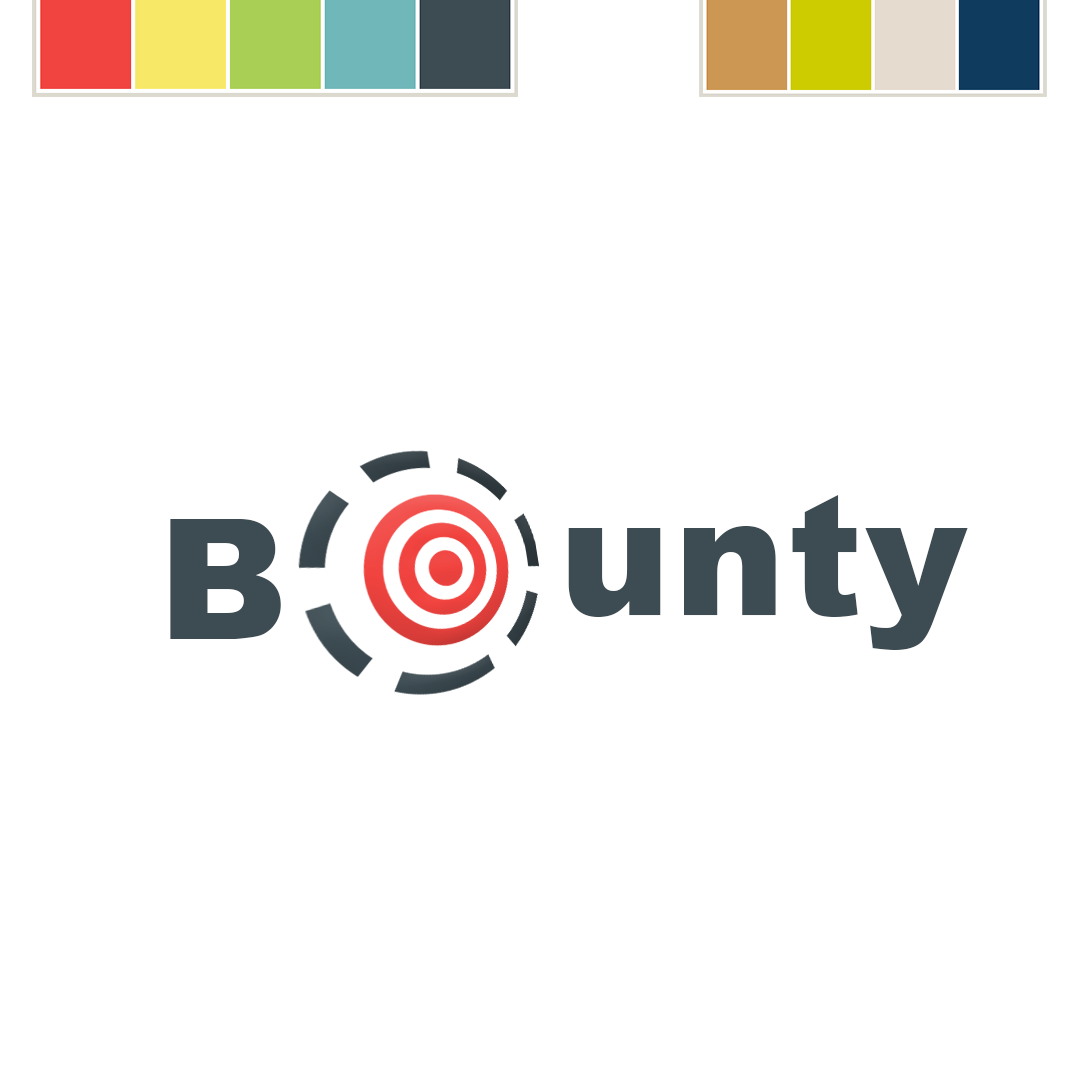
<style>
.page{position:relative;width:1080px;height:1080px;background:#ffffff}
.page>*{position:absolute;margin:0}
.t1{font:166.7px "Arial-Black";letter-spacing:0.02em;color:#3d4c53}
</style>
<div class="page">
<p class="t1" style="left:568px;top:495px;width:400px;height:155px">unty</p>
<p class="t1" style="left:170px;top:519px;width:111px;height:120px">B</p>
</div>
